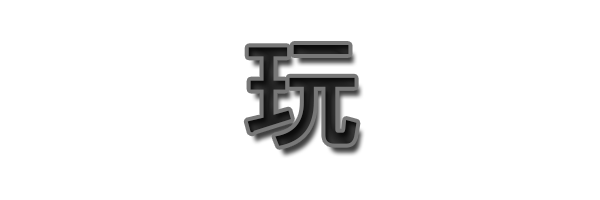
<style>
.page{position:relative;width:600px;height:200px;background:#ffffff}
.page>*{position:absolute;margin:0}
.t1{font:120px "MS-Gothic";color:#1d1d1d}
</style>
<div class="page">
<p class="t1" style="left:247px;top:45px;width:110px;height:101px">玩</p>
</div>
